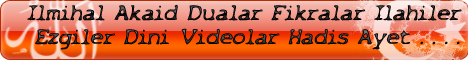
<style>
.page{position:relative;width:468px;height:60px}
.page>*{position:absolute;margin:0}
.t1{font:20px "X-Files-Regular";color:#0f0f0f;font-style:italic}
.t2{font:20px "X-Files-Regular";font-style:italic}
</style>
<div class="page">
<p class="t1" style="left:27px;top:4px;width:435px;height:17px">Ilmihal Akaid Dualar Fikralar Ilahiler</p>
<p class="t2" style="left:35px;top:28px;width:425px;height:22px">Ezgiler Dini Videolar Hadis Ayet . . . .</p>
</div>
